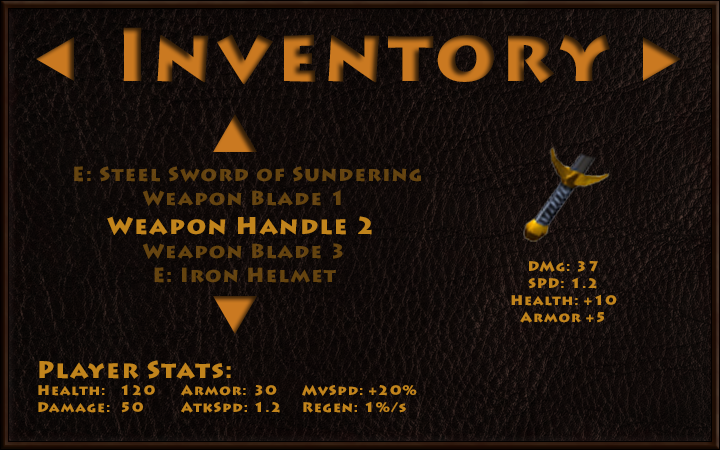
<style>
.page{position:relative;width:720px;height:450px}
.page>*{position:absolute;margin:0}
.t1{font:75px "LithosPro-Black";letter-spacing:0.06em}
.t2{font:20px "LithosPro-Black";letter-spacing:0.06em;color:#644310}
.t3{font:24px "LithosPro-Black";letter-spacing:0.06em;color:#c1841c}
.t4{font:20px "LithosPro-Black";letter-spacing:0.06em;color:#c1841c}
.t5{font:14px "LithosPro-Black";letter-spacing:0.06em;color:#c1841c}
</style>
<div class="page">
<p class="t1" style="left:123px;top:27px;width:487px;height:57px">Inventory</p>
<p class="t2" style="left:74px;top:166px;width:347px;height:117px;text-align:center">E: Steel Sword of Sundering<br>Weapon Blade 1<br><br>Weapon Blade 3<br>E: Iron Helmet</p>
<p class="t3" style="left:107px;top:216px;width:265px;height:19px"><span class="t4"><br><br></span>Weapon Handle 2</p>
<p class="t5" style="left:511px;top:261px;width:106px;height:62px;text-align:center"><span class="t4"><br></span><br>DMg: 37<br>SPD: 1.2<br>Health: +10<br>Armor +5</p>
<p class="t5" style="left:38px;top:360px;width:379px;height:53px"><span class="t3">Player Stats:<br></span>Health:   120 Armor:  30    MvSpd: +20%<br>Damage:  50  AtkSpd: 1.2    Regen: 1%/s</p>
</div>
